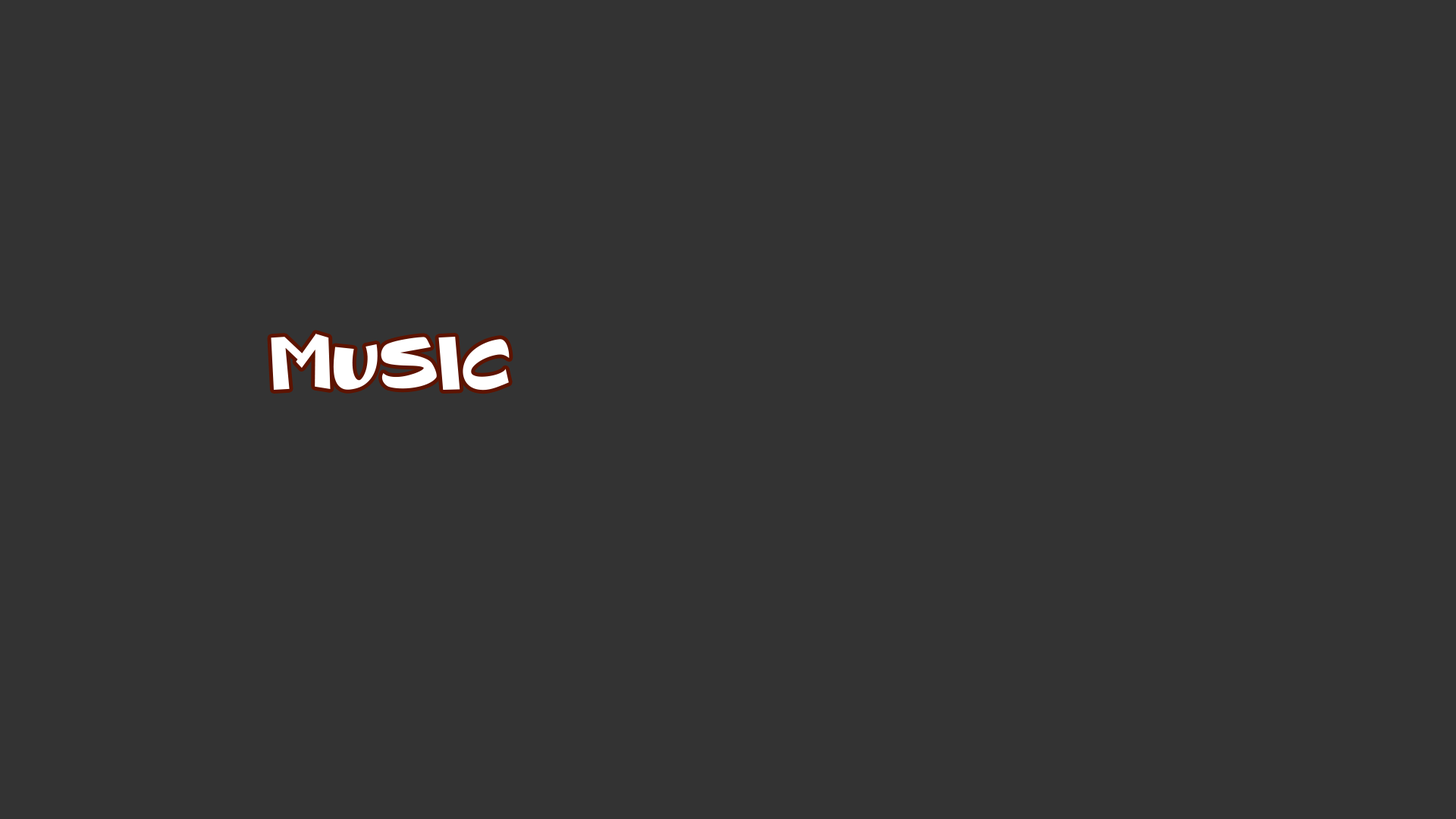
<style>
.page{position:relative;width:1456px;height:819px;background:#333333}
.page>*{position:absolute;margin:0}
.t1{font:80.9px "BLOCKHEADDUDEPersonalUse";color:#ffffff}
</style>
<div class="page">
<p class="t1" style="left:271px;top:334px;width:239px;height:57px">MUSIC</p>
</div>
